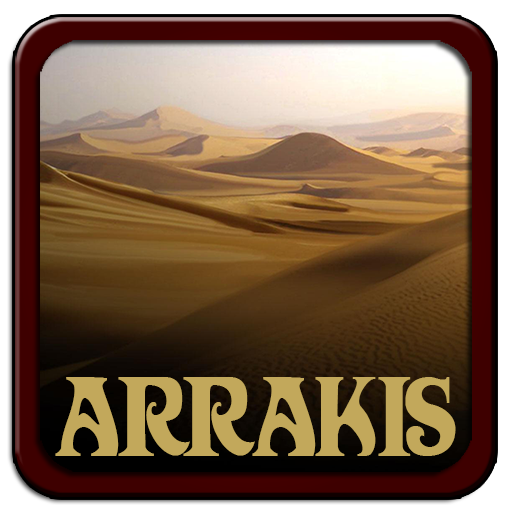
<style>
.page{position:relative;width:512px;height:512px}
.page>*{position:absolute;margin:0}
.t1{font:98px "OrthodoxHerbertarian";color:#c2a85b}
</style>
<div class="page">
<p class="t1" style="left:55px;top:377px;width:401px;height:79px">ARRAKIS</p>
</div>
